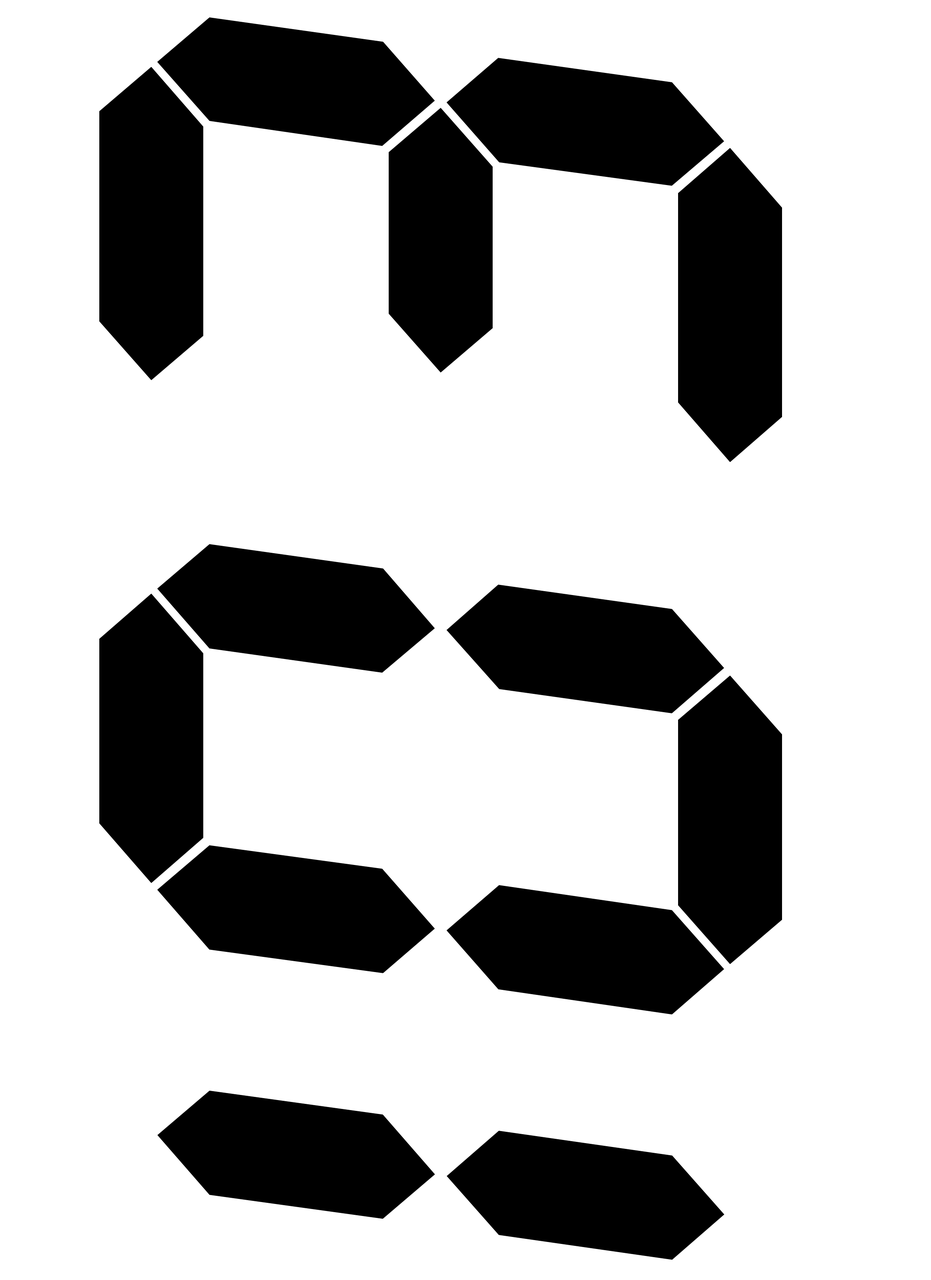
<style>
.page{position:relative;width:931px;height:1280px;background:#ffffff}
.page>*{position:absolute;margin:0}
.t1{font:853.6px "MouseLEDU";letter-spacing:0.1em;color:#000000}
</style>
<div class="page">
<p class="t1" style="left:99px;top:17px;width:683px;height:1243px;rotate:-90deg">103</p>
</div>
